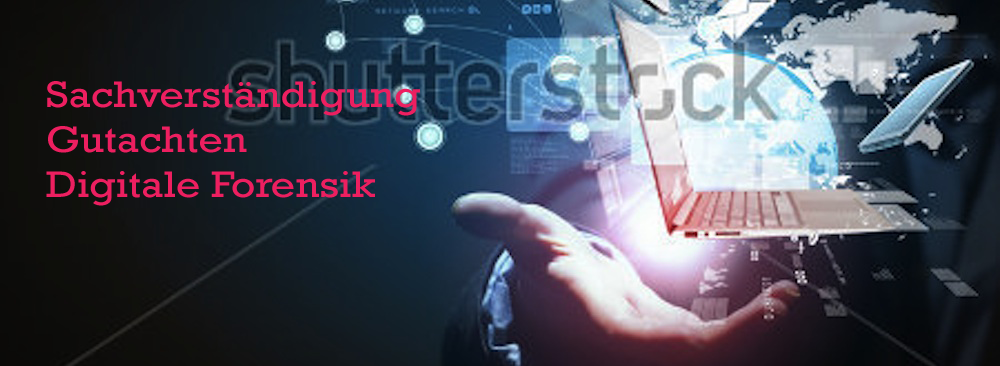
<style>
.page{position:relative;width:1000px;height:366px}
.page>*{position:absolute;margin:0}
.t1{font:37.5px "Rockwell";color:#ed1f60;scale:1.13 1}
</style>
<div class="page">
<p class="t1" style="left:46px;top:81px;width:374px;height:125px">Sachverständigung<br>Gutachten<br>Digitale Forensik</p>
</div>
